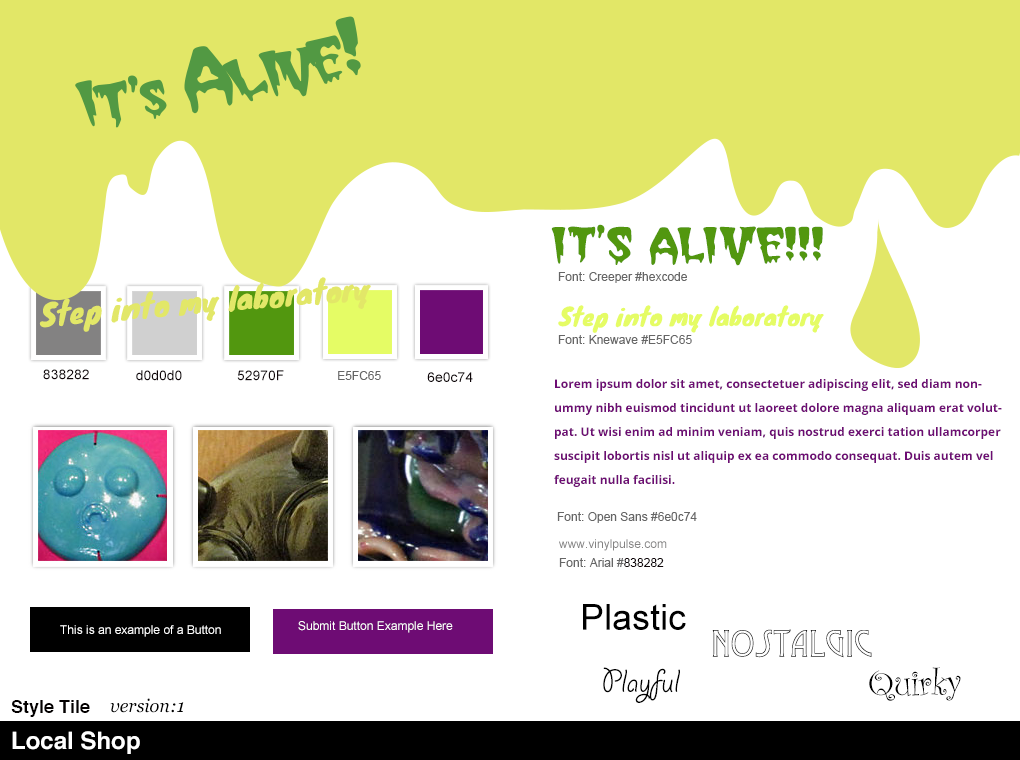
<style>
.page{position:relative;width:1020px;height:760px;background:#ffffff}
.page>*{position:absolute;margin:0}
.t1{font:36px "CreeperRegularSWFTE";color:#52970f}
.t2{font:12px "ArialMT";color:#666666}
.t3{font:24px "Knewave";color:#e5fc65}
.t4{font:14px "ArialMT";color:#0f0609}
.t5{font:12px/24px "OpenSans-Bold";color:#6e0c74}
.t6{font:12px "ArialMT";color:#838282}
.t7{font:12px "ArialMT";color:#0f0609}
.t8{font:36px "ArialMT";color:#000000}
.t9{font:12px "ArialMT";color:#ffffff}
.t10{font:36px "Desdemona";color:#000000}
.t11{font:36px "GiddyupStd";color:#000000}
.t12{font:36px "CurlzMT";color:#000000}
.t13{font:18px "Helvetica-Bold";color:#030000}
.t14{font:18px "Georgia-Italic";color:#000000}
.t15{font:24px "Helvetica-Bold";color:#ffffff}
</style>
<div class="page">
<p class="t1" style="left:551px;top:224px;width:272px;height:42px">IT’S ALIVE!!!</p>
<p class="t2" style="left:558px;top:272px;width:129px;height:11px">Font: Creeper #hexcode</p>
<p class="t3" style="left:558px;top:305px;width:266px;height:28px">Step into my laboratory</p>
<p class="t2" style="left:558px;top:335px;width:134px;height:9px">Font: Knewave #E5FC65</p>
<p class="t4" style="left:43px;top:369px;width:46px;height:11px">838282</p>
<p class="t4" style="left:136px;top:370px;width:46px;height:11px">d0d0d0</p>
<p class="t4" style="left:237px;top:370px;width:47px;height:11px">52970F</p>
<p class="t2" style="left:338px;top:371px;width:43px;height:9px">E5FC65</p>
<p class="t4" style="left:427px;top:372px;width:46px;height:10px">6e0c74</p>
<p class="t5" style="left:554px;top:379px;width:448px;height:108px">Lorem ipsum dolor sit amet, consectetuer adipiscing elit, sed diam nonummy nibh euismod tincidunt ut laoreet dolore magna aliquam erat volutpat. Ut wisi enim ad minim veniam, quis nostrud exerci tation ullamcorper suscipit lobortis nisl ut aliquip ex ea commodo consequat. Duis autem vel feugait nulla facilisi.</p>
<p class="t2" style="left:557px;top:512px;width:140px;height:11px">Font: Open Sans #6e0c74</p>
<p class="t6" style="left:559px;top:539px;width:108px;height:12px">www.vinylpulse.com</p>
<p class="t2" style="left:559px;top:558px;width:105px;height:9px">Font: Arial #<span class="t7">838282</span></p>
<p class="t8" style="left:583px;top:604px;width:103px;height:26px">Plastic</p>
<p class="t9" style="left:60px;top:625px;width:161px;height:12px">This is an example of a Button</p>
<p class="t9" style="left:298px;top:621px;width:155px;height:12px">Submit Button Example Here</p>
<p class="t10" style="left:712px;top:629px;width:160px;height:29px">Nostalgic</p>
<p class="t11" style="left:603px;top:667px;width:77px;height:36px">Playful</p>
<p class="t12" style="left:869px;top:667px;width:92px;height:34px">Quirky</p>
<p class="t13" style="left:11px;top:700px;width:79px;height:17px">Style Tile</p>
<p class="t14" style="left:110px;top:698px;width:74px;height:15px">version:1</p>
<p class="t15" style="left:12px;top:731px;width:128px;height:23px">Local Shop</p>
</div>
